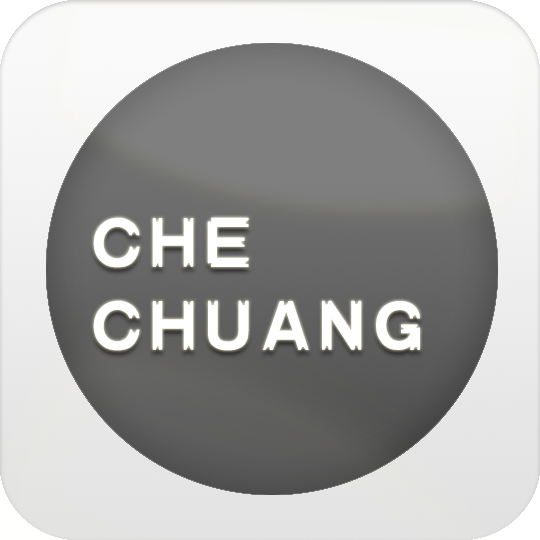
<style>
.page{position:relative;width:540px;height:540px}
.page>*{position:absolute;margin:0}
.t1{font:70px/83px "HYb5gj";letter-spacing:0.08em;color:#ffffff;text-transform:uppercase;font-weight:bold}
</style>
<div class="page">
<p class="t1" style="left:93px;top:217px;width:327px;height:134px">che<br>chuang</p>
</div>
